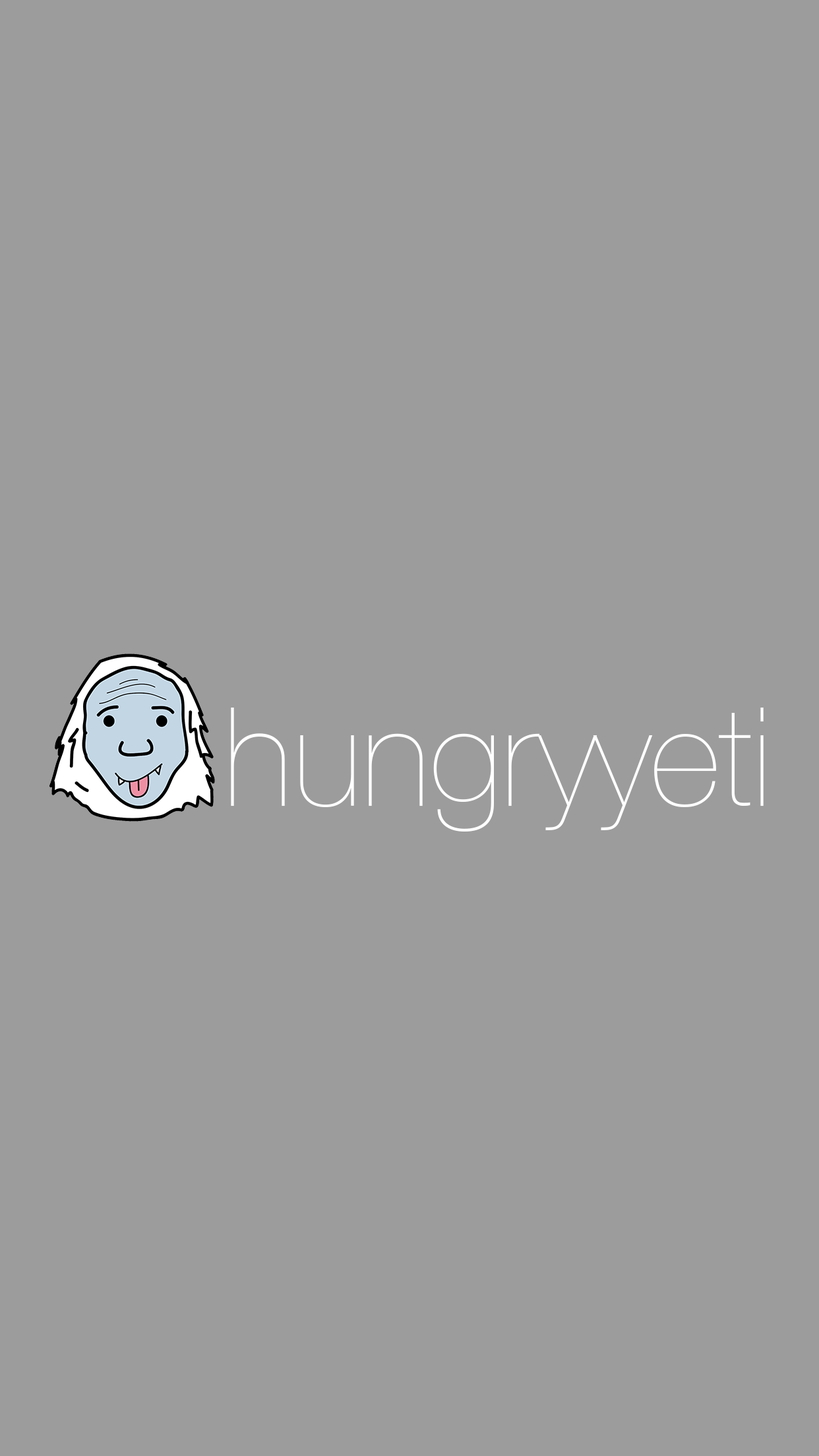
<style>
.page{position:relative;width:819px;height:1456px;background:#9d9c9c}
.page>*{position:absolute;margin:0}
.t1{font:137.4px "HelveticaNeue-UltraLight";color:#ffffff}
</style>
<div class="page">
<p class="t1" style="left:231px;top:708px;width:533px;height:124px">hungryyeti</p>
</div>
